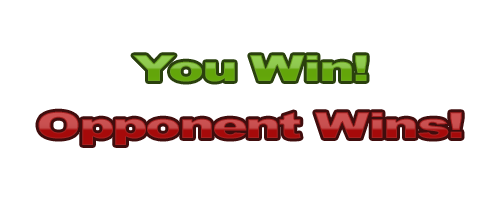
<style>
.page{position:relative;width:500px;height:200px;background:#ffffff}
.page>*{position:absolute;margin:0}
.t1{font:36px "Arial-Black";letter-spacing:-0.05em;scale:1.5 1}
</style>
<div class="page">
<p class="t1" style="left:133px;top:55px;width:234px;height:27px">You Win!</p>
<p class="t1" style="left:38px;top:111px;width:424px;height:34px">Opponent Wins!</p>
</div>
